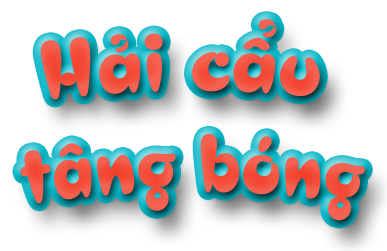
<style>
.page{position:relative;width:387px;height:251px;background:#ffffff}
.page>*{position:absolute;margin:0}
.t1{font:84px "UVNBanhMi";color:#f45947}
</style>
<div class="page">
<p class="t1" style="left:20px;top:19px;width:345px;height:202px;text-align:center">Hải cẩu <br>tâng bóng</p>
</div>
